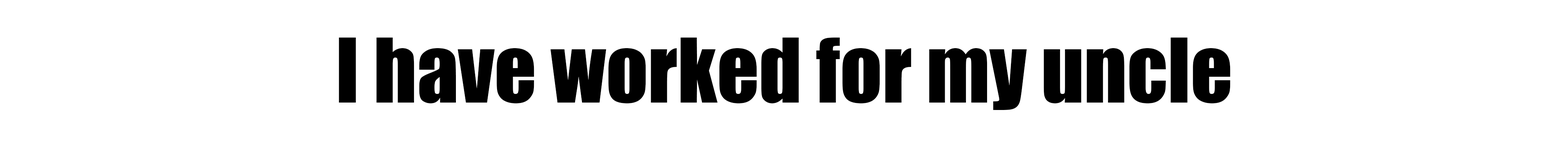
<style>
.page{position:relative;width:1568px;height:155px;background:#ffffff}
.page>*{position:absolute;margin:0}
.t1{font:82.3px "Impact";color:#000000}
</style>
<div class="page">
<p class="t1" style="left:339px;top:37px;width:891px;height:73px">I have worked for my uncle</p>
</div>
